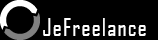
<style>
.page{position:relative;width:158px;height:40px;background:#000000}
.page>*{position:absolute;margin:0}
.t1{font:24px "AgencyFB-Reg";letter-spacing:0.05em;color:#ffffff}
</style>
<div class="page">
<p class="t1" style="left:43px;top:18px;width:103px;height:18px">JeFreelance</p>
</div>
